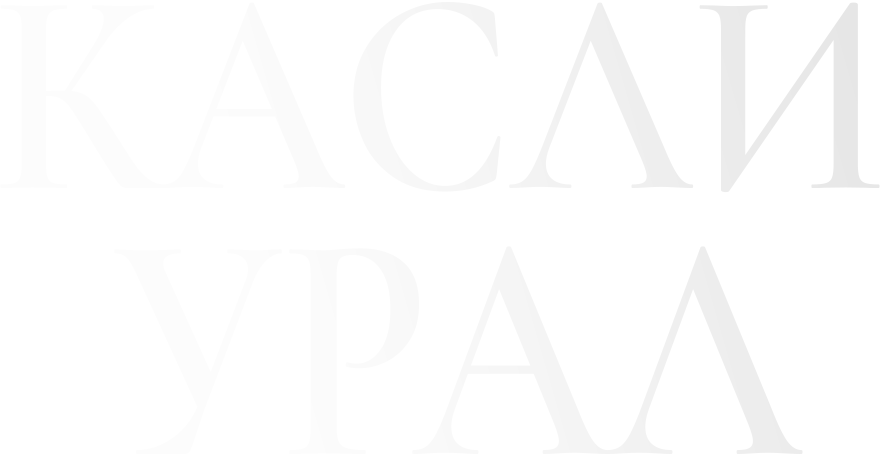
<style>
.page{position:relative;width:887px;height:465px;background:#ffffff}
.page>*{position:absolute;margin:0}
.t1{font:292.4px "CormorantGaramond-SemiBold";color:#f7f7f7;text-transform:uppercase;scale:0.87 1}
.t2{font:327.4px "CormorantGaramond-SemiBold";color:#f8f8f8;text-transform:uppercase;scale:0.83 1}
</style>
<div class="page">
<p class="t1" style="left:0px;top:2px;width:880px;height:191px">Касли</p>
<p class="t2" style="left:114px;top:246px;width:689px;height:208px">Урал</p>
</div>
